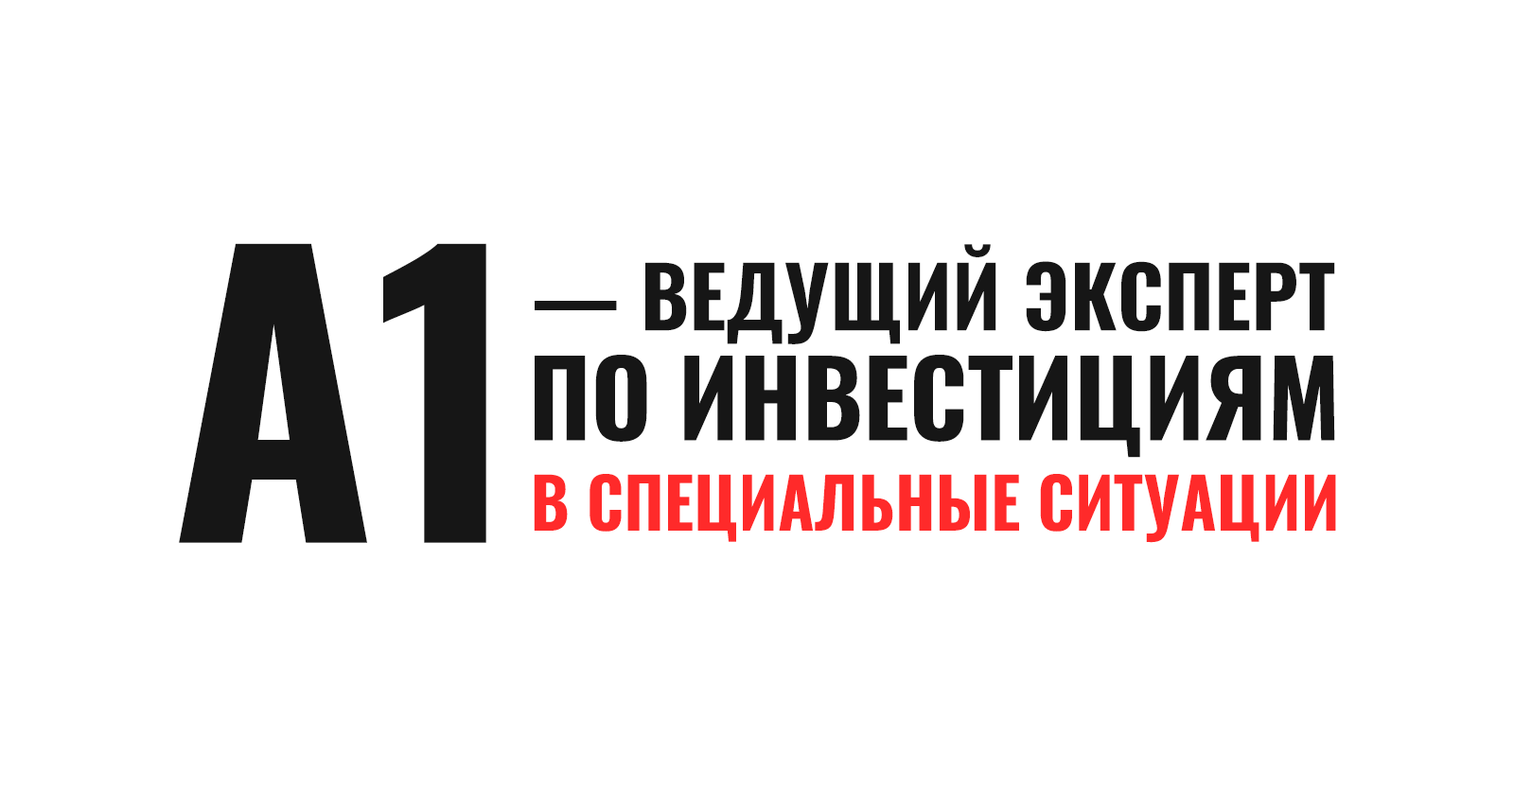
<style>
.page{position:relative;width:1514px;height:787px;background:#ffffff}
.page>*{position:absolute;margin:0}
.t1{font:368.8px "Oswald-Bold";color:#161616;text-transform:uppercase}
.t2{font:80.4px "Oswald-Bold";color:#161616;text-transform:uppercase}
.t3{font:69.3px "Oswald-Bold";color:#ff2a2a;text-transform:uppercase;scale:0.96 1}
</style>
<div class="page">
<p class="t1" style="left:179px;top:243px;width:307px;height:300px">a1</p>
<p class="t2" style="left:535px;top:244px;width:800px;height:214px">— ВЕДУЩИЙ ЭКСПЕРТ <br>ПО ИНВЕСТИЦИЯМ</p>
<p class="t3" style="left:534px;top:474px;width:802px;height:69px">В СПЕЦИАЛЬНЫЕ СИТУАЦИИ</p>
</div>
